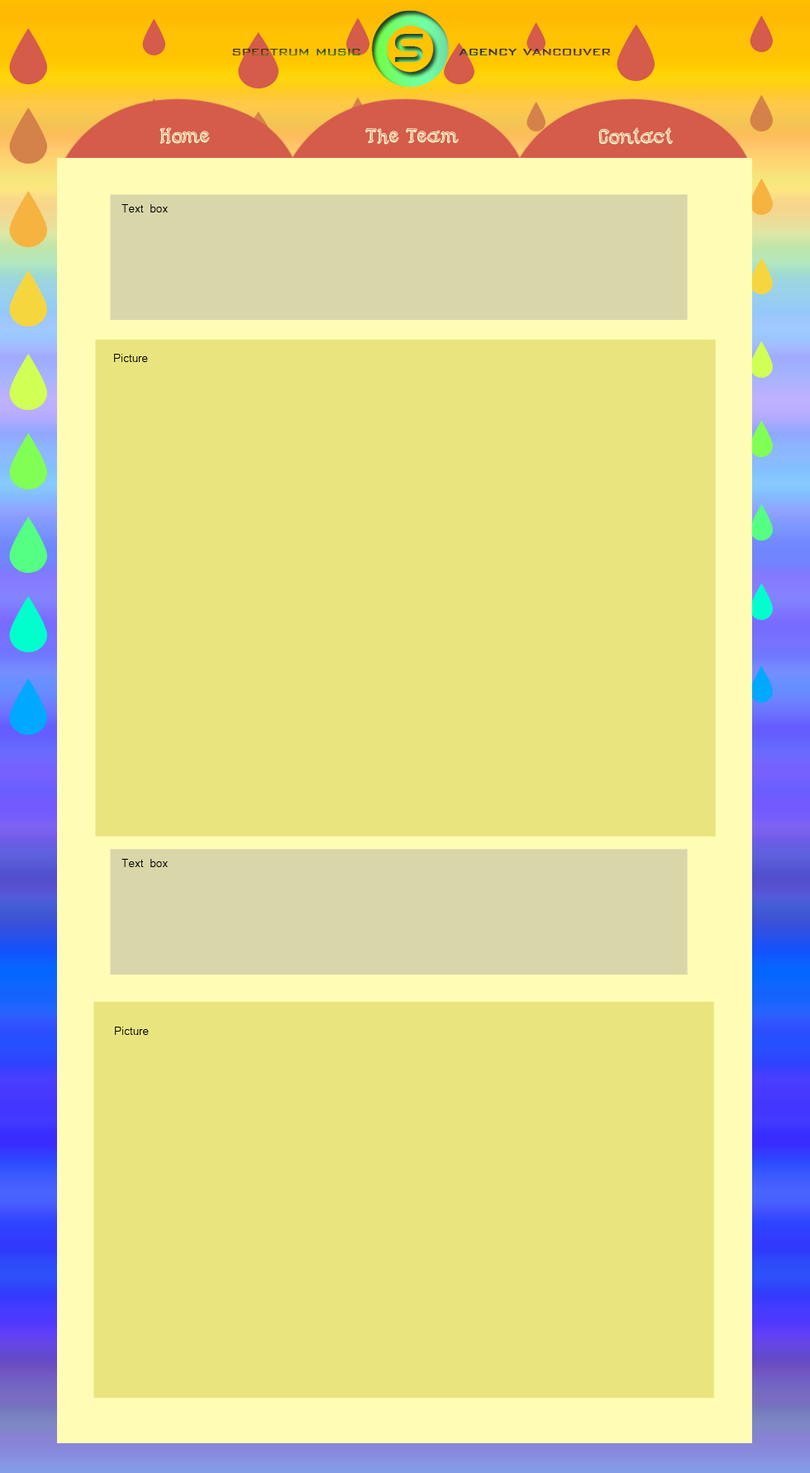
<style>
.page{position:relative;width:810px;height:1473px;background:#e9e47d}
.page>*{position:absolute;margin:0}
.t1{font:29.7px "SemiCursiveGut";color:#fcfacf}
.t2{font:14.9px "Microsoft-Yi-Baiti";color:#000000}
</style>
<div class="page">
<p class="t1" style="left:159px;top:127px;width:51px;height:17px">Home</p>
<p class="t1" style="left:365px;top:127px;width:94px;height:18px">The Team</p>
<p class="t1" style="left:598px;top:127px;width:75px;height:18px">Contact</p>
<p class="t2" style="left:121px;top:204px;width:47px;height:8px">Text box</p>
<p class="t2" style="left:114px;top:354px;width:34px;height:8px">Picture</p>
<p class="t2" style="left:121px;top:859px;width:47px;height:8px">Text box</p>
<p class="t2" style="left:115px;top:1026px;width:34px;height:9px">Picture</p>
</div>
